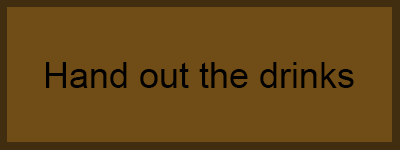
<style>
.page{position:relative;width:400px;height:150px;background:#704c16}
.page>*{position:absolute;margin:0}
.t1{font:36px "ArialMT";color:#000000}
</style>
<div class="page">
<p class="t1" style="left:46px;top:62px;width:308px;height:26px">Hand out the drinks</p>
</div>
